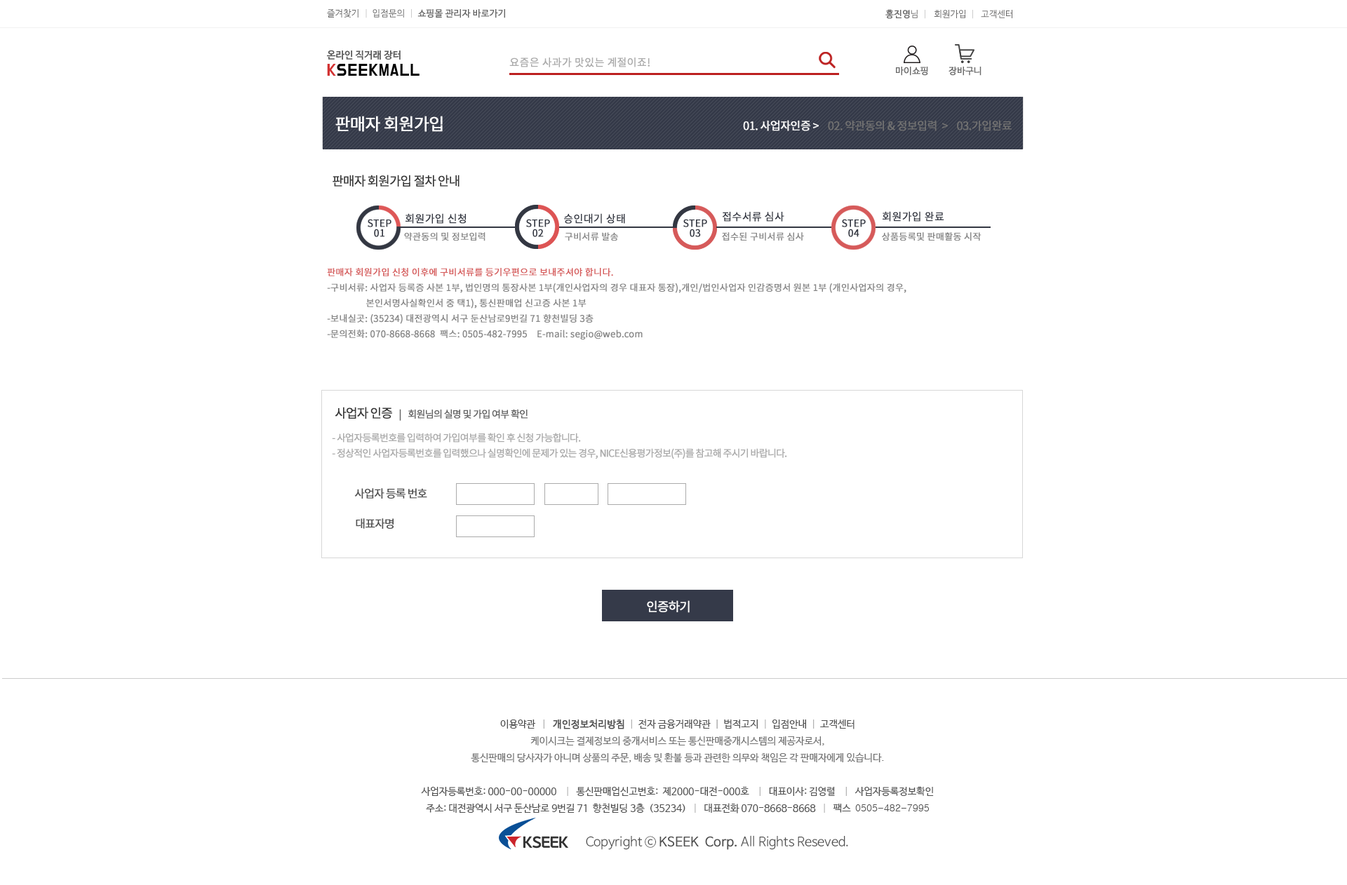
<style>
.page{position:relative;width:1347px;height:885px;background:#ffffff}
.page>*{position:absolute;margin:0}
.t1{font:9.1px "NanumBarunGothic";color:#686868;font-weight:bold}
.t2{font:9.1px "NanumBarunGothic";color:#686868}
.t3{font:9.1px "NanumBarunGothic";color:#cccccc}
.t4{font:9.1px "NanumBarunGothic";color:#696868}
.t5{font:9.1px "NanumBarunGothic";color:#696868;font-weight:bold}
.t6{font:10.5px "NotoSansCJKkr-Regular";color:#aaaaaa;font-weight:bold}
.t7{font:9.1px "NanumBarunGothic";color:#6a6a6a;font-weight:bold}
.t8{font:16.8px "NotoSansCJKkr-Regular";letter-spacing:-0.05em;color:#ffffff;font-weight:bold}
.t9{font:11.2px "NotoSansCJKkr-Regular";letter-spacing:-0.05em;color:#717171;font-weight:bold}
.t10{font:11.2px "NotoSansCJKkr-Regular";letter-spacing:-0.05em;color:#ffffff;font-weight:bold}
.t11{font:12.6px "NotoSansCJKkr-Regular";letter-spacing:-0.075em;color:#373737;font-weight:bold}
.t12{font:9.8px/9.8px "NotoSansCJKkr-Regular";color:#333742;font-weight:bold}
.t13{font:10.5px "NotoSansCJKkr-Regular";color:#333742;font-weight:bold}
.t14{font:9.1px "NotoSansCJKkr-Regular";color:#878787;font-weight:bold}
.t15{font:9.1px/15.4px "NotoSansCJKkr-Regular";color:#878787;font-weight:bold}
.t16{font:9.1px/15.4px "NotoSansCJKkr-Regular";color:#d65a5a;font-weight:bold}
.t17{font:9.8px "NotoSansCJKkr-Regular";letter-spacing:-0.075em;color:#636363;font-weight:bold}
.t18{font:9.8px/15.4px "NotoSansCJKkr-Regular";letter-spacing:-0.075em;color:#ababab;font-weight:bold}
.t19{font:11.2px "NotoSansCJKkr-Regular";letter-spacing:-0.075em;color:#505050;font-weight:bold}
.t20{font:12.6px "NotoSansCJKkr-Regular";letter-spacing:-0.075em;color:#ffffff;font-weight:bold}
.t21{font:9.8px/16.8px "NanumBarunGothic";color:#727272}
.t22{font:9.8px/21px "NanumBarunGothic";color:#515151}
.t23{font:9.8px/16.8px "NanumBarunGothic";color:#515151}
.t24{font:9.8px/16.8px "NanumBarunGothic";color:#b3b3b3}
.t25{font:9.8px/16.8px "NanumBarunGothic";color:#515151;font-weight:bold}
.t26{font:9.8px/16.8px "NanumBarunGothic";color:#949494}
.t27{font:9.8px/16.8px "Gulim";color:#515151}
.t28{font:12.6px "NanumBarunGothicOTFLight";color:#515151}
.t29{font:12.6px "NanumBarunGothicOTFLight";color:#515151;font-weight:bold}
</style>
<div class="page">
<p class="t1" style="left:327px;top:9px;width:178px;height:9px"><span class="t2">즐겨찾기  </span><span class="t3">| </span><span class="t2"> 입점문의  </span><span class="t3">|  </span>쇼핑몰 관리자 바로가기</p>
<p class="t4" style="left:885px;top:9px;width:127px;height:10px"><span class="t5">홍진영</span>님  <span class="t3">|   </span>회원가입  <span class="t3">|   </span>고객센터</p>
<p class="t6" style="left:509px;top:57px;width:141px;height:10px">요즘은 사과가 맛있는 계절이죠!</p>
<p class="t7" style="left:896px;top:67px;width:32px;height:9px">마이쇼핑</p>
<p class="t7" style="left:948px;top:67px;width:33px;height:9px">장바구니</p>
<p class="t8" style="left:335px;top:116px;width:108px;height:16px">판매자 회원가입</p>
<p class="t9" style="left:743px;top:120px;width:269px;height:11px"><span class="t10">01. 사업자인증 &gt;    </span>02. 약관동의 &amp; 정보입력  &gt;    03.가입완료</p>
<p class="t11" style="left:333px;top:175px;width:126px;height:12px">판매자 회원가입 절차 안내</p>
<p class="t12" style="left:368px;top:219px;width:23px;height:18px;text-align:center">STEP<br>01</p>
<p class="t13" style="left:405px;top:213px;width:61px;height:11px">회원가입 신청</p>
<p class="t12" style="left:526px;top:219px;width:24px;height:18px;text-align:center">STEP<br>02</p>
<p class="t13" style="left:564px;top:213px;width:61px;height:11px">승인대기 상태</p>
<p class="t12" style="left:683px;top:219px;width:24px;height:18px;text-align:center">STEP<br>03</p>
<p class="t13" style="left:722px;top:211px;width:62px;height:11px">접수서류 심사</p>
<p class="t12" style="left:842px;top:219px;width:24px;height:18px;text-align:center">STEP<br>04</p>
<p class="t13" style="left:882px;top:211px;width:62px;height:11px">회원가입 완료</p>
<p class="t14" style="left:404px;top:232px;width:81px;height:9px">약관동의 및 정보입력</p>
<p class="t14" style="left:565px;top:232px;width:53px;height:9px">구비서류 발송</p>
<p class="t14" style="left:722px;top:232px;width:82px;height:9px">접수된 구비서류 심사</p>
<p class="t14" style="left:882px;top:232px;width:99px;height:9px">상품등록및 판매활동 시작</p>
<p class="t15" style="left:327px;top:268px;width:579px;height:72px"><span class="t16">판매자 회원가입 신청 이후에 구비서류를 등기우편으로 보내주셔야 합니다.<br></span>-구비서류: 사업자 등록증 사본 1부, 법인명의 통장사본 1부(개인사업자의 경우 대표자 통장),개인/법인사업자 인감증명서 원본 1부 (개인사업자의 경우,<br>                 본인서명사실확인서 중 택1), 통신판매업 신고증 사본 1부<br>-보내실곳: (35234) 대전광역시 서구 둔산남로9번길 71 향천빌딩 3층<br>-문의전화: 070-8668-8668  팩스: 0505-482-7995    E-mail: segio@web.com</p>
<p class="t17" style="left:335px;top:407px;width:193px;height:14px"><span class="t11">사업자 인증   </span>|    회원님의 실명 및 가입 여부 확인</p>
<p class="t18" style="left:332px;top:433px;width:455px;height:26px">- 사업자등록번호를 입력하여 가입여부를 확인 후 신청 가능합니다.<br>- 정상적인 사업자등록번호를 입력했으나 실명확인에 문제가 있는 경우, NICE신용평가정보(주)를 참고해 주시기 바랍니다.</p>
<p class="t19" style="left:354px;top:488px;width:73px;height:11px">사업자 등록 번호</p>
<p class="t19" style="left:356px;top:518px;width:38px;height:11px">대표자명</p>
<p class="t20" style="left:647px;top:600px;width:43px;height:13px">인증하기</p>
<p class="t21" style="left:421px;top:719px;width:513px;height:95px;text-align:center"><span class="t22">이</span><span class="t23">용약관  </span><span class="t24"> |   </span><span class="t25">개인정보처리방침</span><span class="t24">  |  </span><span class="t23">전자 금융거래약관</span><span class="t26">  |  </span><span class="t23">법적고지</span><span class="t24">  | </span><span class="t23"> 입점안내 </span><span class="t24"> |  </span><span class="t23">고객센터<br></span>케이시크는 결제정보의 중개서비스 또는 통신판매중개시스템의 제공자로서, <br>통신판매의 당사자가 아니며 상품의 주문, 배송 및 환불 등과 관련한 의무와 책임은 각 판매자에게 있습니다.<br><span class="t23"><br>사업자등록번호: 000-00-00000   </span><span class="t24"> | </span><span class="t23">  통신판매업신고번호:  제2000-대전-000호  </span><span class="t24">  |   </span><span class="t23">대표이사: 김영렬 </span><span class="t24">   |   </span><span class="t23">사업자등록정보확인<br>주소: 대전광역시 서구 둔산남로 9번길 71  향천빌딩 3층  (35234)</span><span class="t24">   |  </span><span class="t23"> 대표전화 070-8668-8668 </span><span class="t24">  |  </span><span class="t23"> 팩스  </span><span class="t27">0505-482-7995</span></p>
<p class="t28" style="left:586px;top:836px;width:262px;height:14px">Copyright ⓒ <span class="t29">KSEEK  Corp.</span> All Rights Reseved.</p>
</div>
